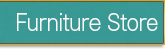
<style>
.page{position:relative;width:165px;height:49px}
.page>*{position:absolute;margin:0}
.t1{font:22px "GothicMB101Pro-Light";letter-spacing:-0.02em;color:#fbfbf9;scale:0.9 1}
</style>
<div class="page">
<p class="t1" style="left:17px;top:13px;width:141px;height:18px">Furniture Store</p>
</div>
